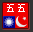
<style>
.page{position:relative;width:33px;height:32px;background:#f20000}
.page>*{position:absolute;margin:0}
.t1{font:10.4px "SimSun";color:#ffffff}
</style>
<div class="page">
<p class="t1" style="left:7px;top:4px;width:18px;height:8px">五五</p>
</div>
